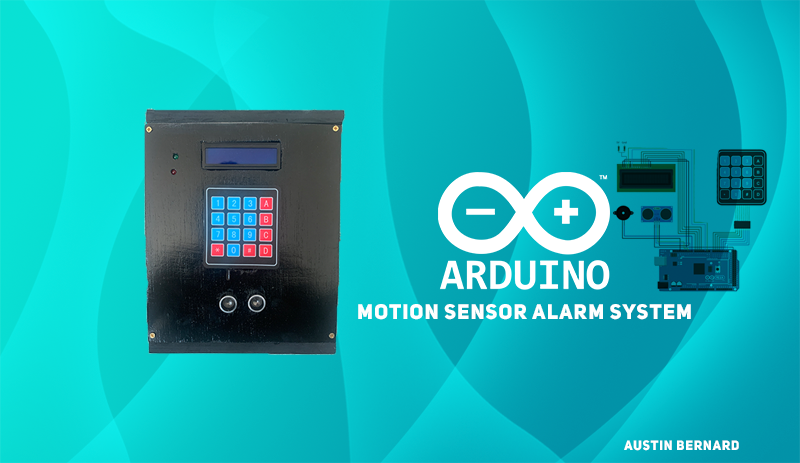
<style>
.page{position:relative;width:800px;height:463px}
.page>*{position:absolute;margin:0}
.t1{font:20.8px "UniSansHeavyCAPS";letter-spacing:0.035em;color:#ffffff;text-transform:uppercase}
.t2{font:13.5px "UniSansHeavyCAPS";letter-spacing:0.035em;color:#ffffff;text-transform:uppercase}
</style>
<div class="page">
<p class="t1" style="left:358px;top:304px;width:333px;height:16px">Motion Sensor Alarm System</p>
<p class="t2" style="left:624px;top:440px;width:115px;height:11px">Austin Bernard</p>
</div>
